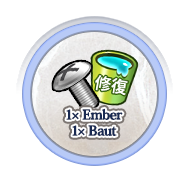
<style>
.page{position:relative;width:189px;height:188px;background:#ffffff}
.page>*{position:absolute;margin:0}
.t1{font:14px/16px "HeiseiMinStd-W7";letter-spacing:-0.04em;color:#192a52;font-weight:bold}
</style>
<div class="page">
<p class="t1" style="left:66px;top:108px;width:57px;height:28px;text-align:center">1× Ember<br>1× Baut</p>
</div>
